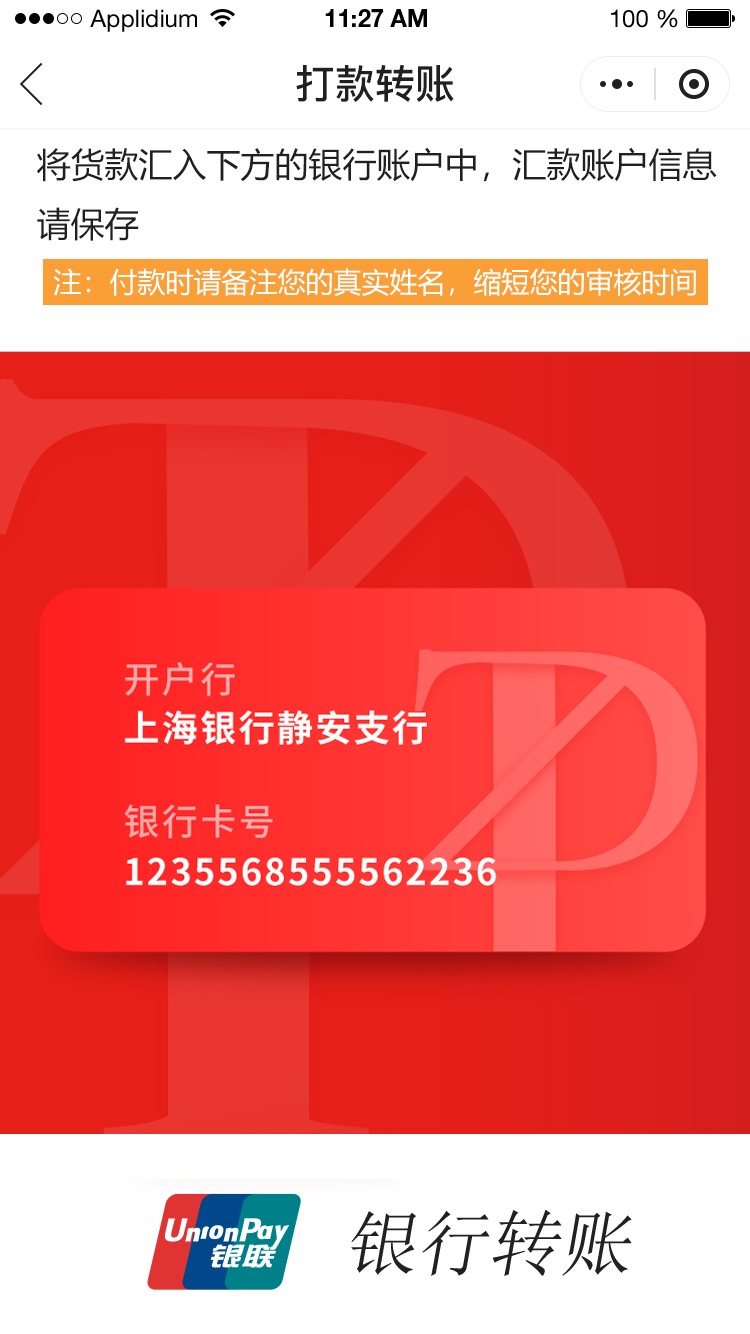
<style>
.page{position:relative;width:750px;height:1334px;background:#ffffff}
.page>*{position:absolute;margin:0}
.t1{font:24px "HelveticaNeueLTStd-Roman";color:#000000}
.t2{font:24px "HelveticaNeueLTStd-Bd";color:#000000}
.t3{font:40px "PingFang-SC-Bold";color:#202020;text-transform:uppercase}
.t4{font:34px "MicrosoftYaHei";color:#202020;text-transform:uppercase}
.t5{font:28px "MicrosoftYaHei";color:#ffffff;text-transform:uppercase}
</style>
<div class="page">
<p class="t1" style="left:90px;top:9px;width:107px;height:23px">Applidium</p>
<p class="t2" style="left:325px;top:9px;width:102px;height:18px">11:27 AM</p>
<p class="t1" style="left:611px;top:9px;width:67px;height:19px">100 %</p>
<p class="t3" style="left:296px;top:65px;width:158px;height:37px">打款转账</p>
<p class="t4" style="left:36px;top:147px;width:681px;height:94px">将货款汇入下方的银行账户中，汇款账户信息<br>请保存</p>
<p class="t5" style="left:53px;top:268px;width:643px;height:28px">注：付款时请备注您的真实姓名，缩短您的审核时间</p>
</div>
